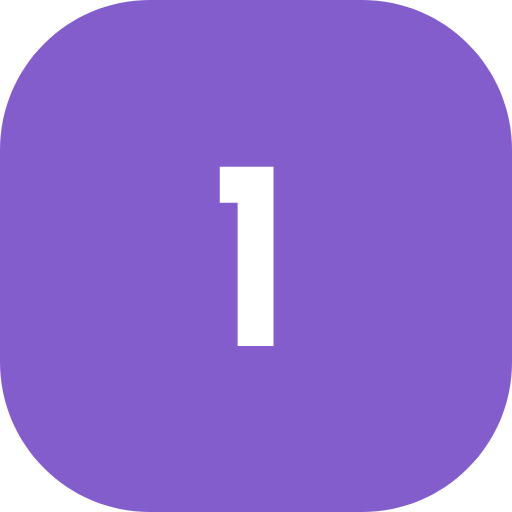
<style>
.page{position:relative;width:512px;height:512px;background:#835dcc}
.page>*{position:absolute;margin:0}
.t1{font:256px "Righteous-Regular";color:#ffffff}
</style>
<div class="page">
<p class="t1" style="left:219px;top:166px;width:55px;height:180px">1</p>
</div>
